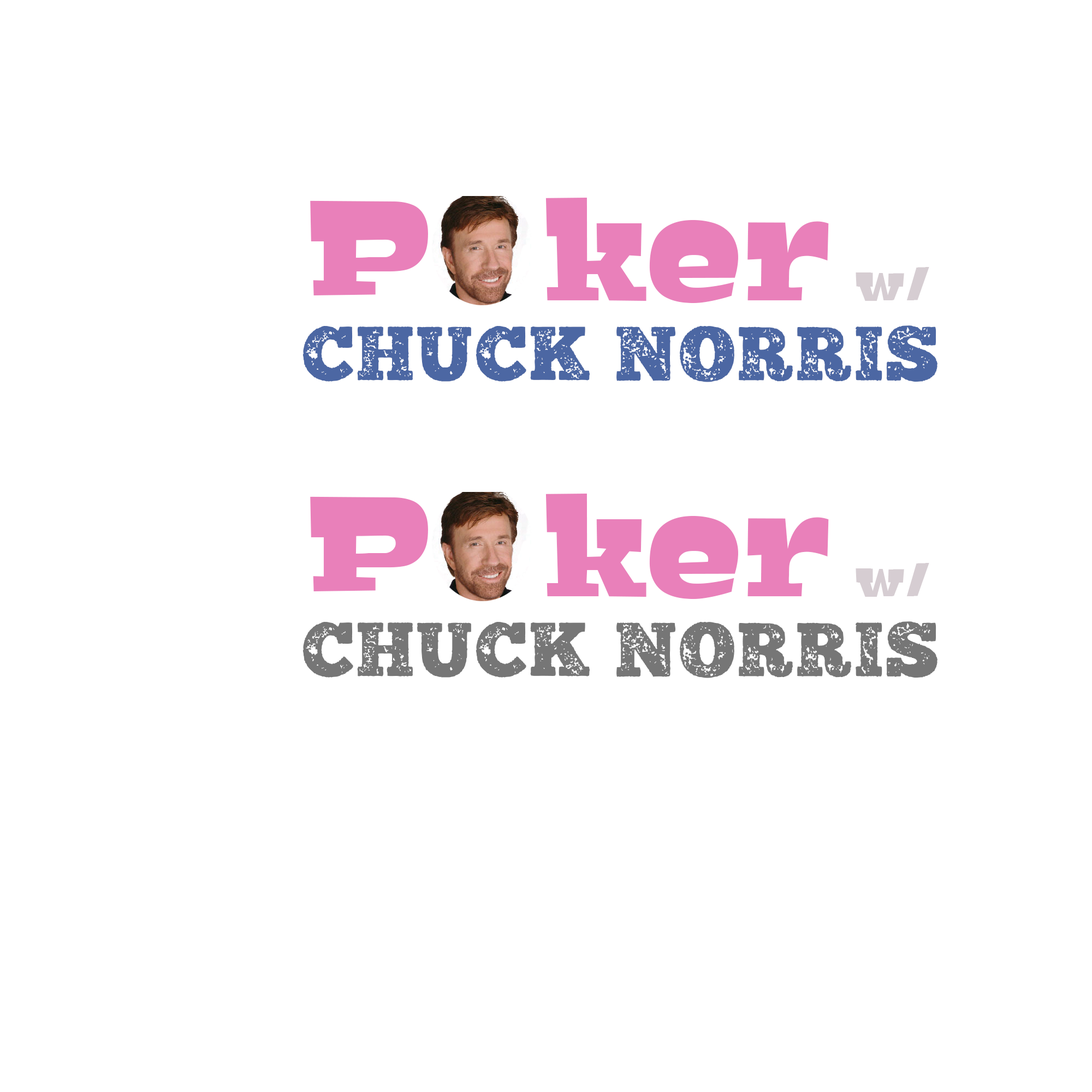
<style>
.page{position:relative;width:1092px;height:1092px;background:#ffffff}
.page>*{position:absolute;margin:0}
.t1{font:143.6px "Bigfish-Black";letter-spacing:0.015em;color:#e980ba}
.t2{font:50.8px "Bigfish-Black";letter-spacing:0.015em;color:#d6cdd2}
.t3{font:83.5px "Distractor-Roman";letter-spacing:0.015em;color:#4c67a3}
.t4{font:83.5px "Distractor-Roman";letter-spacing:0.015em;color:#767676}
</style>
<div class="page">
<p class="t1" style="left:545px;top:198px;width:284px;height:105px">ker</p>
<p class="t1" style="left:310px;top:200px;width:118px;height:95px">P</p>
<p class="t2" style="left:856px;top:267px;width:73px;height:34px">w/</p>
<p class="t3" style="left:302px;top:325px;width:635px;height:57px">CHUCK NORRIS</p>
<p class="t1" style="left:310px;top:496px;width:118px;height:95px">P</p>
<p class="t1" style="left:545px;top:494px;width:284px;height:105px">ker</p>
<p class="t2" style="left:856px;top:563px;width:73px;height:34px">w/</p>
<p class="t4" style="left:302px;top:621px;width:635px;height:57px">CHUCK NORRIS</p>
</div>
